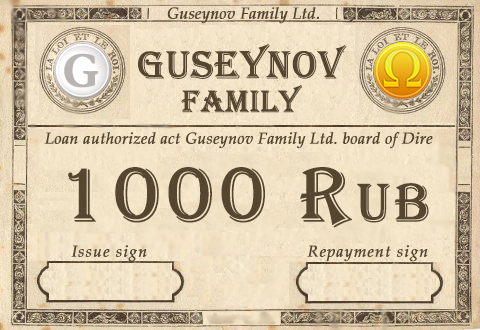
<style>
.page{position:relative;width:480px;height:330px}
.page>*{position:absolute;margin:0}
.t1{font:16px "BookAntiqua-Italic";color:#55462f;font-weight:bold}
.t2{font:40px "Algerian";color:#55462f;font-weight:bold}
.t3{font:32px "Algerian";color:#55462f;font-weight:bold}
.t4{font:16px "PalatinoLinotype-Italic";color:#55462f;font-variant:small-caps;font-weight:bold}
.t5{font:80px "Algerian";letter-spacing:0.05em;color:#55462f;font-variant:small-caps;font-weight:bold}
.t6{font:16px "PalatinoLinotype-Italic";letter-spacing:0.05em;color:#55462f;font-variant:small-caps;font-weight:bold}
</style>
<div class="page">
<p class="t1" style="left:167px;top:7px;width:152px;height:17px">Guseynov Family Ltd.</p>
<p class="t2" style="left:138px;top:44px;width:209px;height:35px">GUSEYNOV</p>
<p class="t3" style="left:181px;top:85px;width:121px;height:28px">Family</p>
<p class="t4" style="left:44px;top:132px;width:389px;height:17px">Loan authorized act Guseynov Family Ltd. board of Dire</p>
<p class="t5" style="left:68px;top:167px;width:361px;height:61px">1000 Rub</p>
<p class="t6" style="left:71px;top:245px;width:76px;height:17px">Issue sign</p>
<p class="t6" style="left:307px;top:245px;width:121px;height:17px">Repayment sign</p>
</div>
